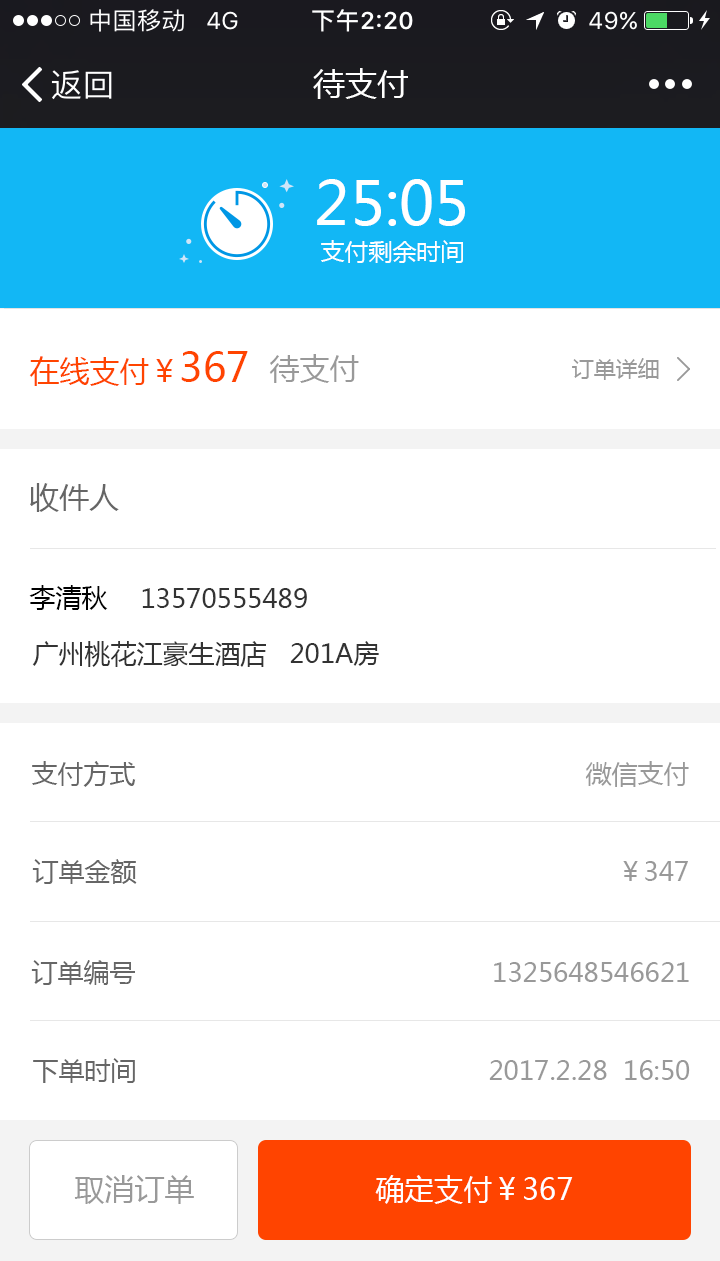
<style>
.page{position:relative;width:720px;height:1261px;background:#ffffff}
.page>*{position:absolute;margin:0}
.t1{font:32px "MicrosoftYaHei";color:#ffffff}
.t2{font:60px "MicrosoftYaHei";color:#ffffff}
.t3{font:24px "MicrosoftYaHei";color:#ffffff}
.t4{font:30px "MicrosoftYaHei";color:#ff4400}
.t5{font:40px "MicrosoftYaHei";color:#ff4400}
.t6{font:30px "MicrosoftYaHei";color:#999999}
.t7{font:22px "MicrosoftYaHei";color:#999999}
.t8{font:30px "MicrosoftYaHei";color:#666666}
.t9{font:26px "MicrosoftYaHei";color:#000000}
.t10{font:26px "MicrosoftYaHei";color:#333333}
.t11{font:26px "MicrosoftYaHei";color:#666666}
.t12{font:26px "MicrosoftYaHei";color:#999999}
.t13{font:30px "MicrosoftYaHei";color:#ffffff}
</style>
<div class="page">
<p class="t1" style="left:313px;top:68px;width:95px;height:31px">待支付</p>
<p class="t2" style="left:317px;top:179px;width:148px;height:47px">25:05</p>
<p class="t3" style="left:321px;top:240px;width:142px;height:23px">支付剩余时间</p>
<p class="t4" style="left:29px;top:351px;width:219px;height:35px">在线支付￥<span class="t5">367</span></p>
<p class="t6" style="left:269px;top:354px;width:90px;height:29px">待支付</p>
<p class="t7" style="left:572px;top:358px;width:87px;height:22px">订单详细</p>
<p class="t8" style="left:30px;top:483px;width:89px;height:29px">收件人</p>
<p class="t9" style="left:29px;top:585px;width:79px;height:25px">李清秋</p>
<p class="t10" style="left:142px;top:588px;width:165px;height:20px">13570555489</p>
<p class="t10" style="left:32px;top:641px;width:347px;height:26px">广州桃花江豪生酒店   201A房</p>
<p class="t11" style="left:32px;top:761px;width:104px;height:26px">支付方式</p>
<p class="t12" style="left:585px;top:761px;width:104px;height:26px">微信支付</p>
<p class="t11" style="left:32px;top:859px;width:105px;height:25px">订单金额</p>
<p class="t12" style="left:623px;top:861px;width:65px;height:20px">￥347</p>
<p class="t11" style="left:31px;top:960px;width:104px;height:25px">订单编号</p>
<p class="t12" style="left:494px;top:962px;width:195px;height:20px">1325648546621</p>
<p class="t11" style="left:33px;top:1058px;width:102px;height:25px">下单时间</p>
<p class="t12" style="left:489px;top:1060px;width:201px;height:20px">2017.2.28  16:50</p>
<p class="t6" style="left:74px;top:1175px;width:120px;height:29px">取消订单</p>
<p class="t13" style="left:375px;top:1175px;width:198px;height:29px">确定支付￥367</p>
</div>
